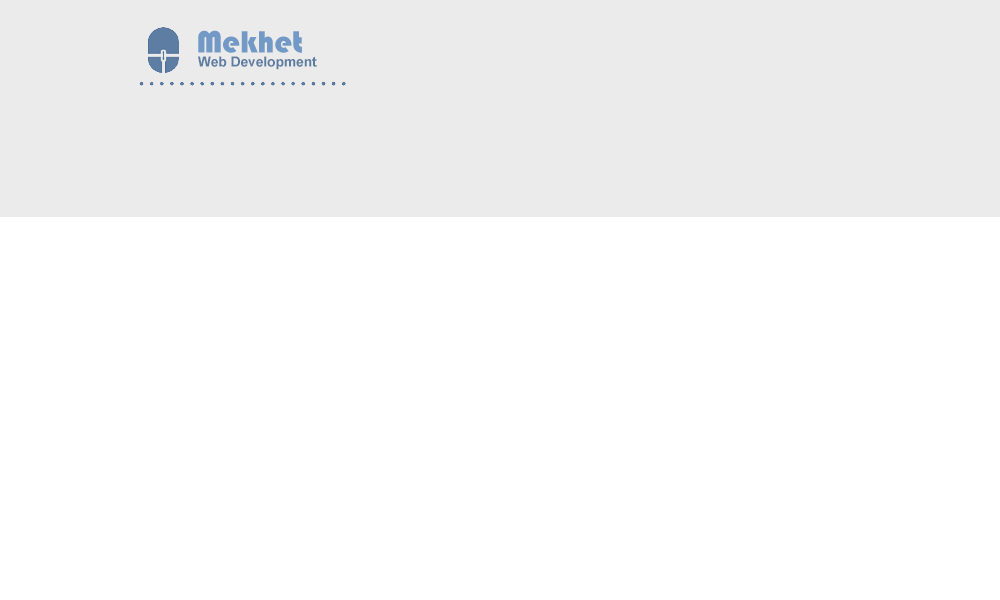
<style>
.page{position:relative;width:1000px;height:600px;background:#ffffff}
.page>*{position:absolute;margin:0}
.t1{font:32px "Bauhaus93";color:#7399c7}
.t2{font:13.7px "Arial-BoldMT";color:#5e7da2}
</style>
<div class="page">
<p class="t1" style="left:198px;top:30px;width:104px;height:23px">Mekhet</p>
<p class="t2" style="left:198px;top:56px;width:119px;height:14px">Web Development</p>
</div>
